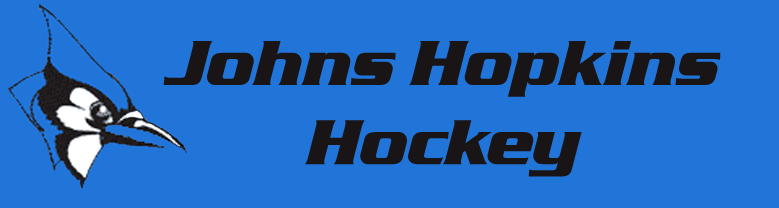
<style>
.page{position:relative;width:779px;height:208px;background:#2175d9}
.page>*{position:absolute;margin:0}
.t1{font:66px "SerpentineD-BoldItal";color:#191516}
</style>
<div class="page">
<p class="t1" style="left:163px;top:41px;width:558px;height:136px;text-align:center">Johns Hopkins<br>Hockey</p>
</div>
